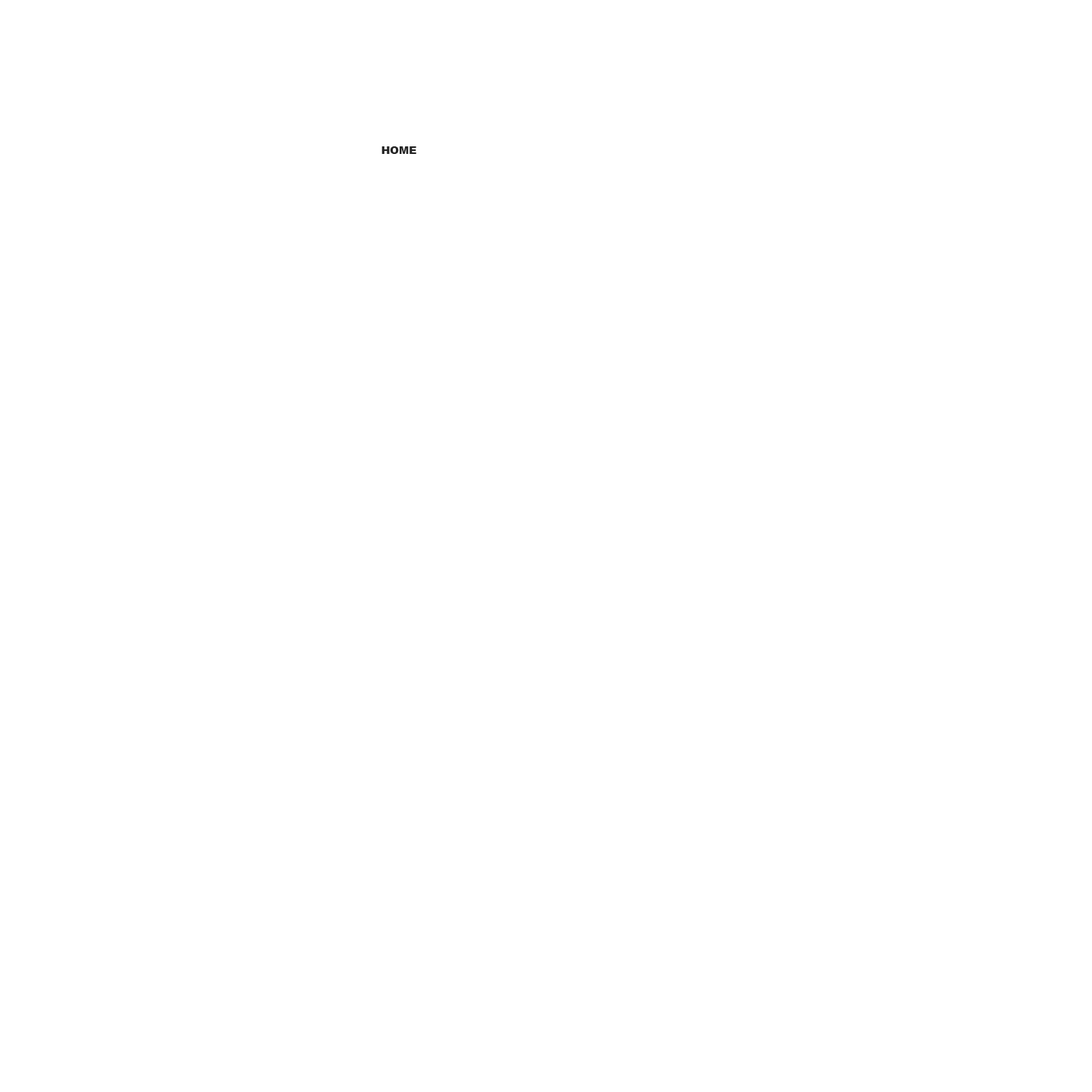
<style>
.page{position:relative;width:1092px;height:1092px;background:#ffffff}
.page>*{position:absolute;margin:0}
.t1{font:10.6px "Arial-Black";color:#252525}
</style>
<div class="page">
<p class="t1" style="left:381px;top:146px;width:35px;height:8px">HOME</p>
</div>
